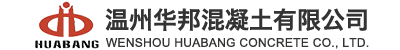
<style>
.page{position:relative;width:400px;height:50px;background:#ffffff}
.page>*{position:absolute;margin:0}
.t1{font:24px "HiraginoSansGB-W6";color:#333333}
.t2{font:12px "ArialMT";letter-spacing:0.025em;color:#333333}
</style>
<div class="page">
<p class="t1" style="left:105px;top:8px;width:262px;height:23px">温州华邦混凝土有限公司</p>
<p class="t2" style="left:106px;top:38px;width:263px;height:11px">WENSHOU HUABANG CONCRETE CO., LTD.</p>
</div>
